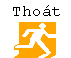
<style>
.page{position:relative;width:71px;height:58px;background:#ffffff}
.page>*{position:absolute;margin:0}
.t1{font:12px "CourierNewPSMT";color:#000000}
</style>
<div class="page">
<p class="t1" style="left:13px;top:5px;width:47px;height:11px">Thoát</p>
</div>
